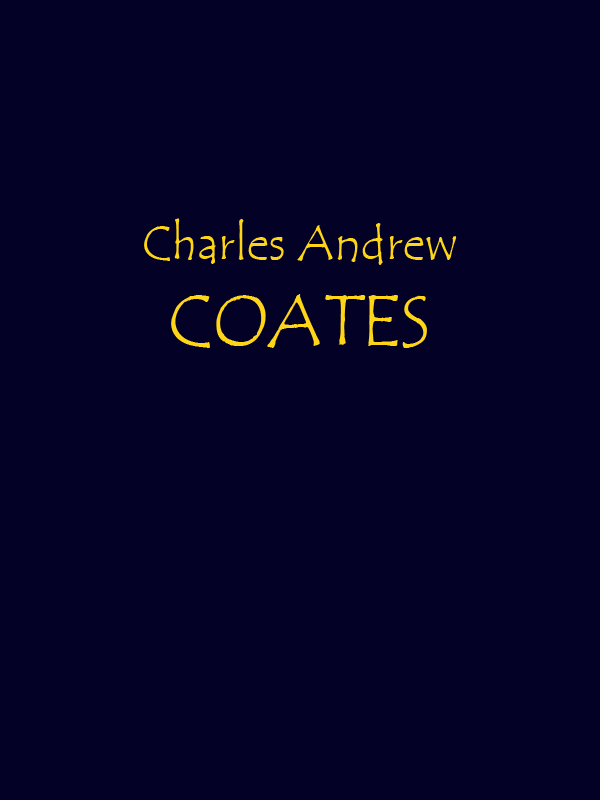
<style>
.page{position:relative;width:600px;height:800px;background:#030226}
.page>*{position:absolute;margin:0}
.t1{font:48px "TempusSansITC";color:#ffd617}
.t2{font:72px "TempusSansITC";color:#ffd617}
</style>
<div class="page">
<p class="t1" style="left:144px;top:218px;width:313px;height:130px;text-align:center">Charles Andrew<br><span class="t2">COATES</span></p>
</div>
